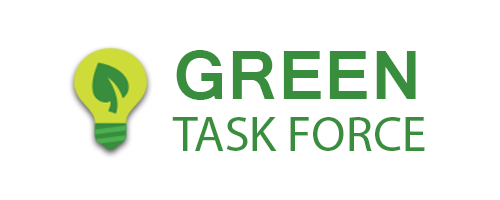
<style>
.page{position:relative;width:500px;height:200px;background:#ffffff}
.page>*{position:absolute;margin:0}
.t1{font:75px "Latha-Bold";color:#388e3c}
.t2{font:50px "MyriadPro-Regular";color:#388e3c}
</style>
<div class="page">
<p class="t1" style="left:176px;top:50px;width:240px;height:50px">GREEN</p>
<p class="t2" style="left:172px;top:117px;width:253px;height:34px">TASK FORCE</p>
</div>
